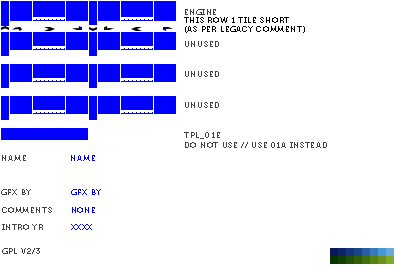
<style>
.page{position:relative;width:400px;height:270px;background:#ffffff}
.page>*{position:absolute;margin:0}
.t1{font:8px "Museo700-Regular";letter-spacing:0.075em;color:#000000;text-transform:uppercase}
.t2{font:8px "Museo700-Regular";letter-spacing:0.075em;color:#404040;text-transform:uppercase}
.t3{font:8px "Museo700-Regular";letter-spacing:0.075em;color:#0000ff;text-transform:uppercase}
</style>
<div class="page">
<p class="t1" style="left:184px;top:17px;width:121px;height:16px">this row 1 tile short<br>(as per legacy comment)</p>
<p class="t2" style="left:185px;top:9px;width:31px;height:6px">engine</p>
<p class="t2" style="left:185px;top:41px;width:34px;height:6px">unused</p>
<p class="t2" style="left:185px;top:71px;width:34px;height:6px">unused</p>
<p class="t2" style="left:185px;top:102px;width:34px;height:6px">unused</p>
<p class="t2" style="left:184px;top:132px;width:143px;height:16px">tpl_01e<br>do not use // use 01a instead</p>
<p class="t2" style="left:2px;top:155px;width:24px;height:6px">name</p>
<p class="t3" style="left:71px;top:155px;width:24px;height:6px">name</p>
<p class="t2" style="left:1px;top:189px;width:30px;height:6px">gfx by</p>
<p class="t3" style="left:71px;top:189px;width:30px;height:6px">gfx by</p>
<p class="t2" style="left:2px;top:207px;width:50px;height:6px">comments</p>
<p class="t3" style="left:72px;top:207px;width:23px;height:6px">none</p>
<p class="t2" style="left:2px;top:224px;width:41px;height:6px">intro yr</p>
<p class="t3" style="left:71px;top:224px;width:21px;height:6px">xxxx</p>
<p class="t2" style="left:2px;top:248px;width:38px;height:6px">gpl v2/3</p>
</div>
